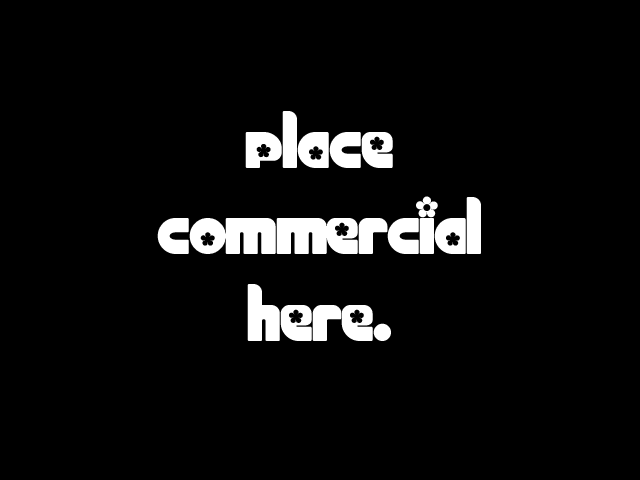
<style>
.page{position:relative;width:640px;height:480px;background:#000000}
.page>*{position:absolute;margin:0}
.t1{font:72px "Chick";color:#ffffff}
</style>
<div class="page">
<p class="t1" style="left:157px;top:111px;width:324px;height:230px;text-align:center">Place<br>commercial<br>here.</p>
</div>
